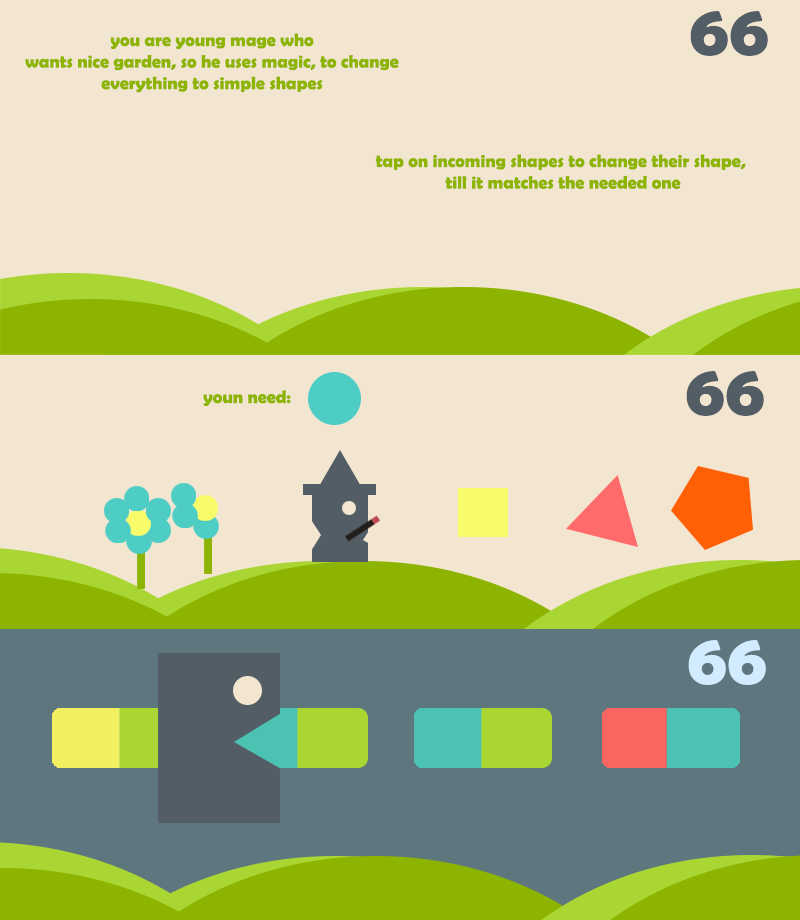
<style>
.page{position:relative;width:800px;height:920px;background:#f3e6d1}
.page>*{position:absolute;margin:0}
.t1{font:72px "BerlinSansFBDemi-Bold";color:#535d65}
.t2{font:18px "BerlinSansFBDemi-Bold";color:#8cb400}
.t3{font:72px "BerlinSansFBDemi-Bold";color:#d2ebff}
</style>
<div class="page">
<p class="t1" style="left:690px;top:11px;width:78px;height:45px">66</p>
<p class="t2" style="left:25px;top:33px;width:374px;height:60px;text-align:center">you are young mage who<br>wants nice garden, so he uses magic, to change<br>everything to simple shapes</p>
<p class="t2" style="left:375px;top:154px;width:371px;height:35px;text-align:center">tap on incoming shapes to change their shape, <br>till it matches the needed one</p>
<p class="t1" style="left:686px;top:371px;width:78px;height:45px">66</p>
<p class="t2" style="left:203px;top:390px;width:88px;height:16px">youn need:</p>
<p class="t3" style="left:688px;top:640px;width:78px;height:45px">66</p>
</div>
